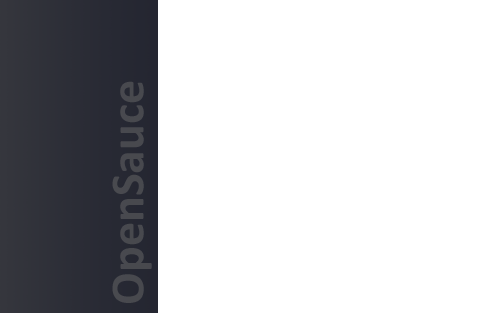
<style>
.page{position:relative;width:494px;height:313px;background:#ffffff}
.page>*{position:absolute;margin:0}
.t1{font:48px "Calibri-Bold";color:#48494e}
</style>
<div class="page">
<p class="t1" style="left:112px;top:81px;width:40px;height:222px;rotate:-90deg">OpenSauce</p>
</div>
